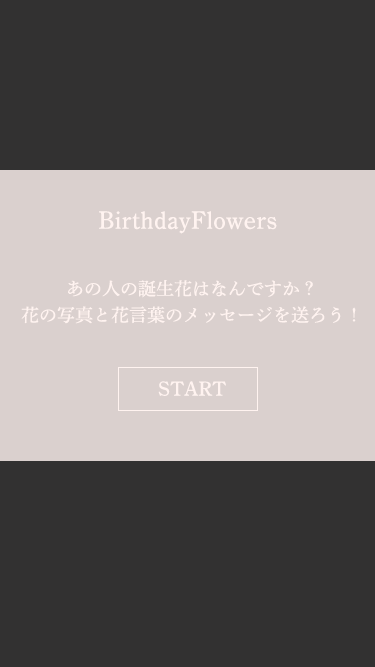
<style>
.page{position:relative;width:375px;height:667px;background:#323131}
.page>*{position:absolute;margin:0}
.t1{font:25px "ShueiMinPro-M";color:#fff3f0}
.t2{font:18px/26.4px "ShueiMinPro-M";color:#fff3f0}
.t3{font:20px "ShueiMinPro-M";color:#fff3f0;scale:1.07 1}
</style>
<div class="page">
<p class="t1" style="left:99px;top:211px;width:178px;height:23px">BirthdayFlowers</p>
<p class="t2" style="left:21px;top:280px;width:335px;height:44px;text-align:center">あの人の誕生花はなんですか？<br>花の写真と花言葉のメッセージを送ろう！</p>
<p class="t3" style="left:158px;top:381px;width:68px;height:15px">START</p>
</div>
